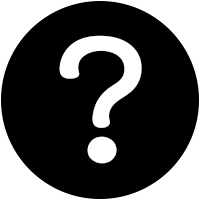
<style>
.page{position:relative;width:200px;height:200px;background:#000000}
.page>*{position:absolute;margin:0}
.t1{font:166.7px "MDArt";color:#ffffff}
</style>
<div class="page">
<p class="t1" style="left:59px;top:35px;width:83px;height:129px">?</p>
</div>
